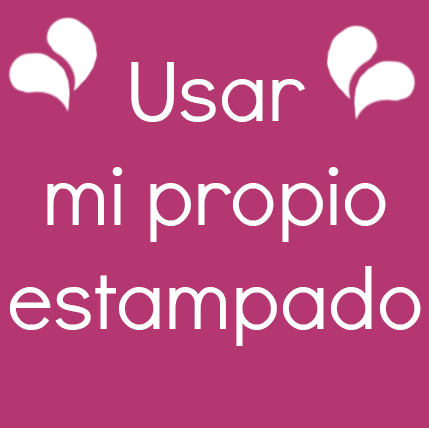
<style>
.page{position:relative;width:429px;height:428px;background:#b43772}
.page>*{position:absolute;margin:0}
.t1{font:86.7px "DidactGothic";color:#ffffff}
</style>
<div class="page">
<p class="t1" style="left:9px;top:62px;width:412px;height:284px;text-align:center">Usar<br>mi propio<br>estampado</p>
</div>
